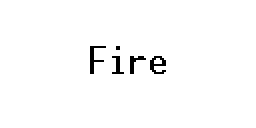
<style>
.page{position:relative;width:256px;height:128px;background:#ffffff}
.page>*{position:absolute;margin:0}
.t1{font:36px "Terminal";color:#000000}
</style>
<div class="page">
<p class="t1" style="left:90px;top:46px;width:76px;height:28px">Fire</p>
</div>
